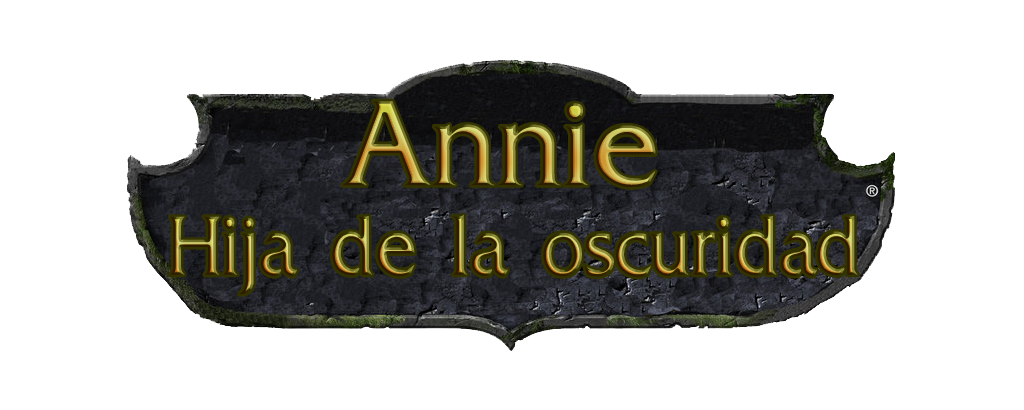
<style>
.page{position:relative;width:1024px;height:410px;background:#ffffff}
.page>*{position:absolute;margin:0}
.t1{font:139.8px "FrizQuadrata-Thin";scale:0.96 1}
.t2{font:97.9px "FrizQuadrata-Thin";scale:0.84 1}
</style>
<div class="page">
<p class="t1" style="left:342px;top:101px;width:314px;height:87px">Annie</p>
<p class="t2" style="left:169px;top:214px;width:689px;height:81px">Hija de la oscuridad</p>
</div>
